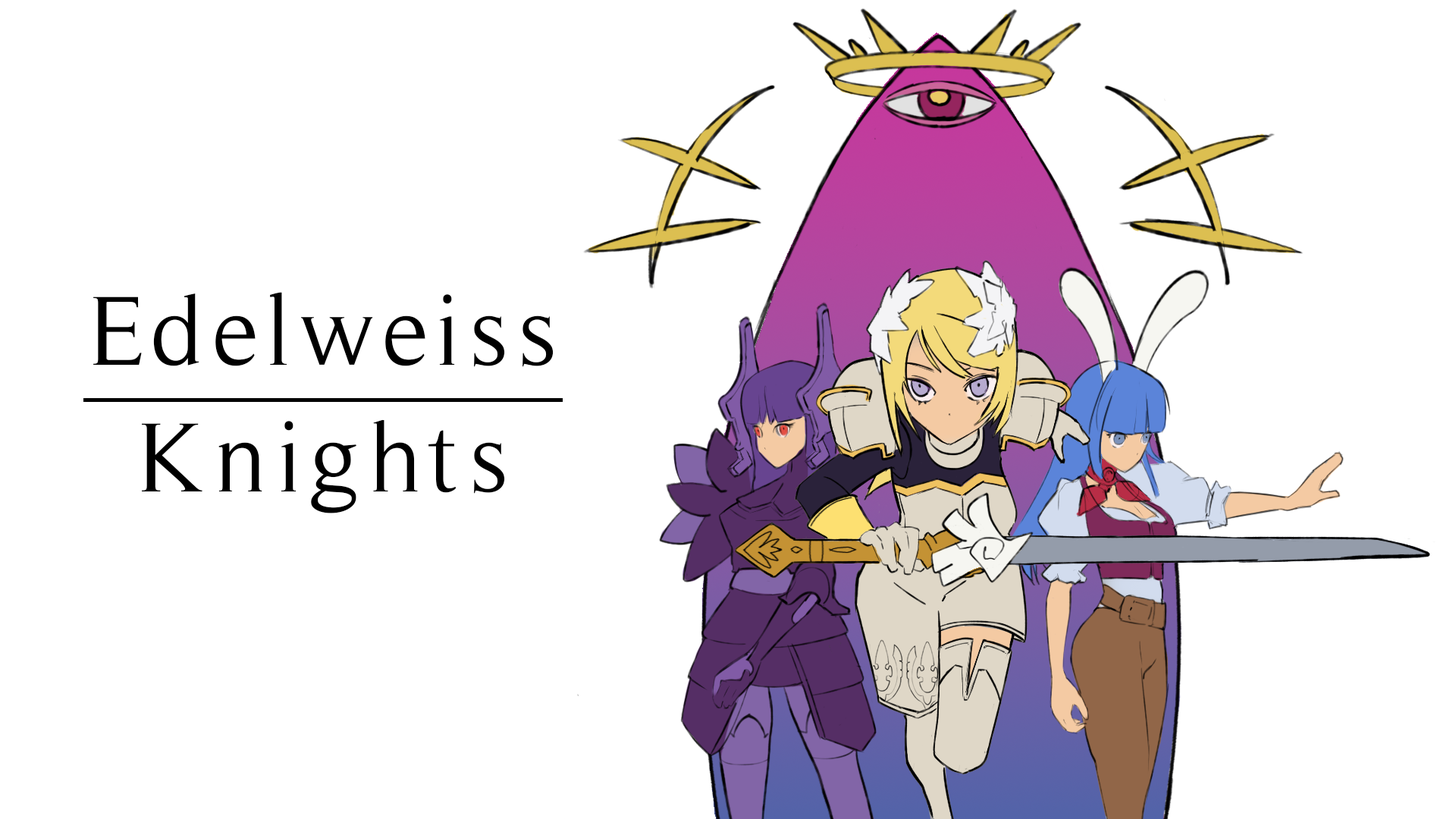
<style>
.page{position:relative;width:1456px;height:819px;background:#ffffff}
.page>*{position:absolute;margin:0}
.t1{font:100.4px "Timeless-Normal";letter-spacing:0.06em;color:#000000}
</style>
<div class="page">
<p class="t1" style="left:93px;top:292px;width:461px;height:221px;text-align:center">Edelweiss<br>Knights</p>
</div>
